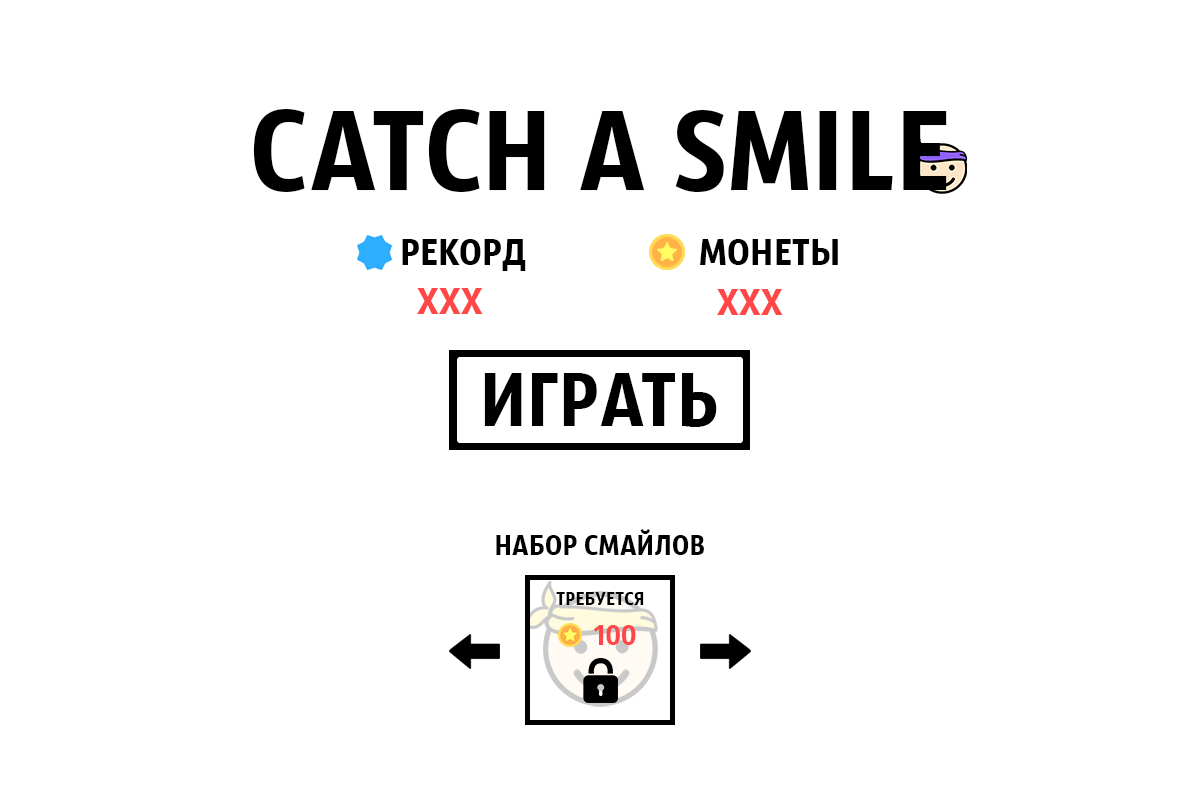
<style>
.page{position:relative;width:1200px;height:800px;background:#ffffff}
.page>*{position:absolute;margin:0}
.t1{font:120px "SansusWebissimo";letter-spacing:0.01em;color:#000000}
.t2{font:40px "SansusWebissimo";letter-spacing:0.01em;color:#000000}
.t3{font:40px "SansusWebissimo";letter-spacing:0.01em;color:#ff4747}
.t4{font:80px "SansusWebissimo";letter-spacing:0.01em;color:#000000}
.t5{font:30px "SansusWebissimo";letter-spacing:0.01em;color:#000000}
</style>
<div class="page">
<p class="t1" style="left:253px;top:109px;width:694px;height:83px">CATCH A SMILE</p>
<p class="t2" style="left:402px;top:239px;width:124px;height:32px">РЕКОРД</p>
<p class="t2" style="left:700px;top:239px;width:138px;height:26px">МОНЕТЫ</p>
<p class="t3" style="left:417px;top:288px;width:66px;height:26px">XXX</p>
<p class="t3" style="left:717px;top:289px;width:66px;height:26px">XXX</p>
<p class="t4" style="left:484px;top:373px;width:233px;height:54px">ИГРАТЬ</p>
<p class="t5" style="left:496px;top:529px;width:208px;height:26px">НАБОР СМАЙЛОВ</p>
</div>
